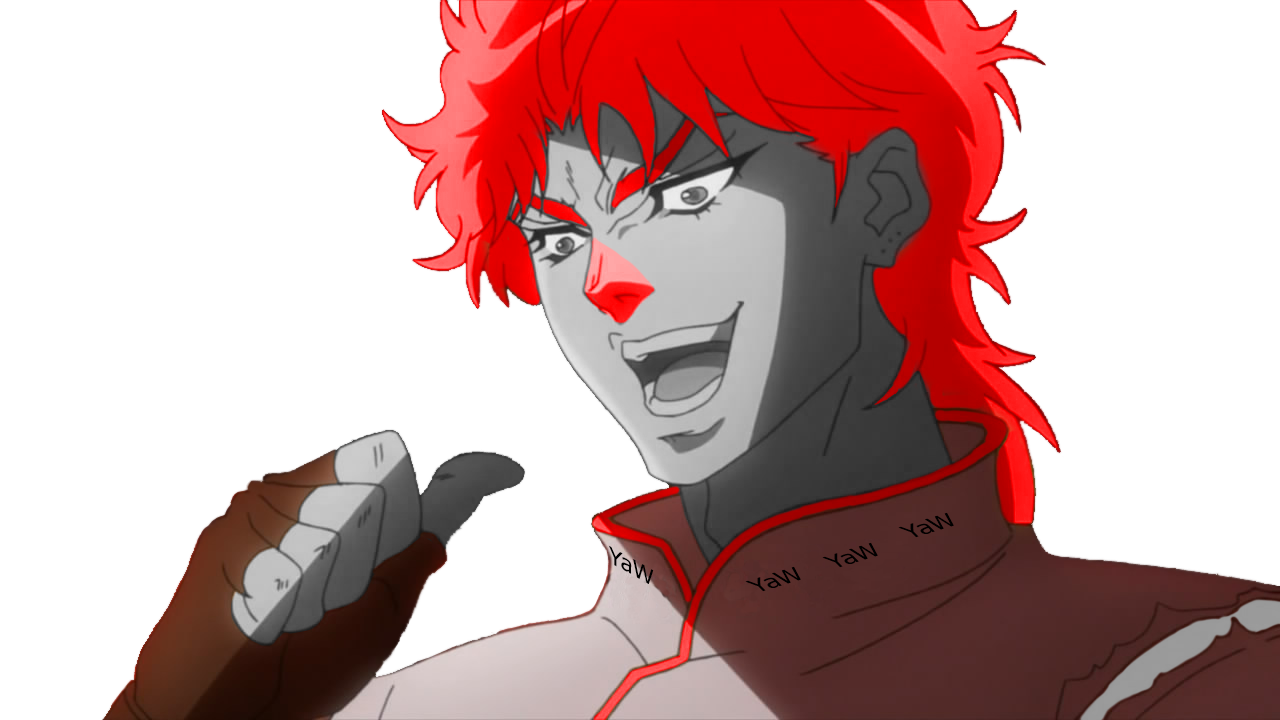
<style>
.page{position:relative;width:1280px;height:720px;background:#ffffff}
.page>*{position:absolute;margin:0}
.t1{font:22.3px "Tahoma";color:#000000;scale:1.18 1}
</style>
<div class="page">
<p class="t1" style="left:898px;top:512px;width:56px;height:26px;rotate:-17deg">YaW</p>
<p class="t1" style="left:608px;top:545px;width:46px;height:39px;rotate:29deg">YaW</p>
<p class="t1" style="left:822px;top:542px;width:56px;height:26px;rotate:-17deg">YaW</p>
<p class="t1" style="left:745px;top:566px;width:56px;height:26px;rotate:-17deg">YaW</p>
</div>
